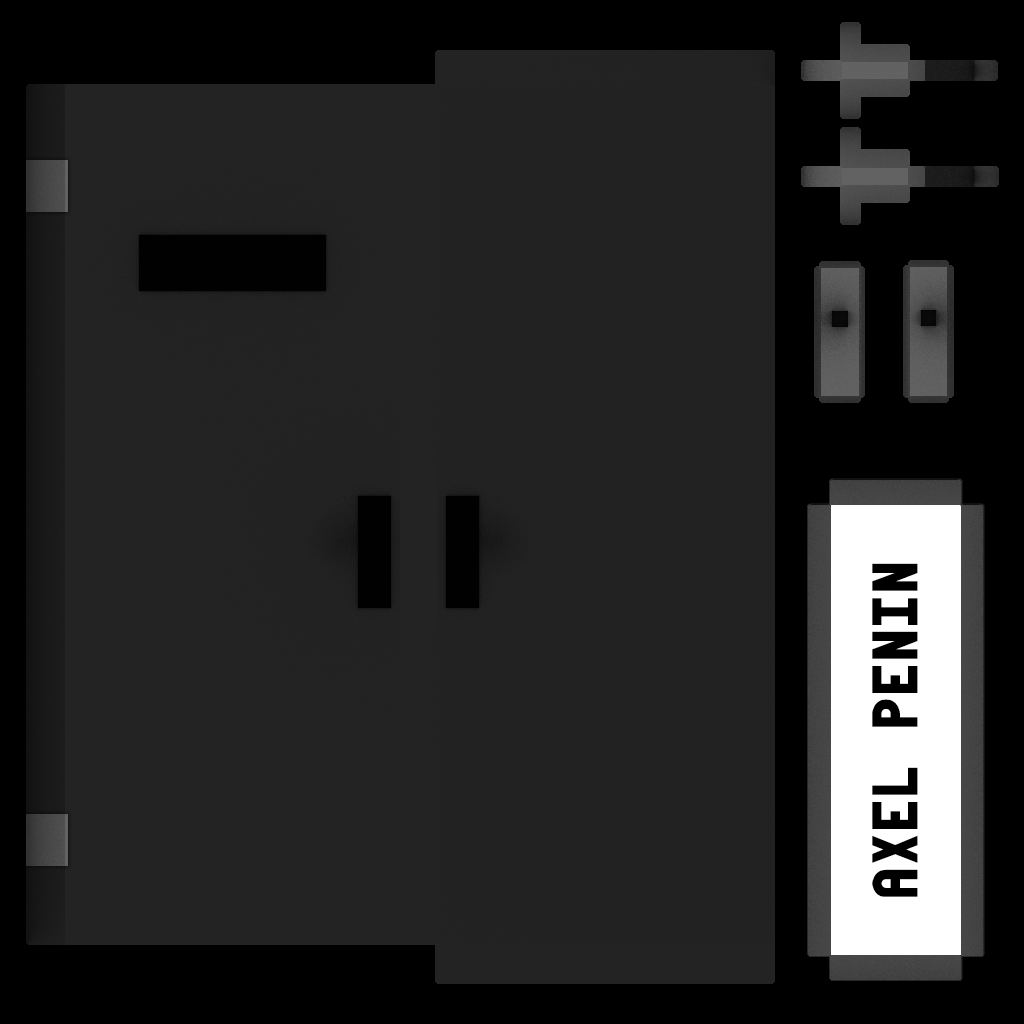
<style>
.page{position:relative;width:1024px;height:1024px;background:#232323}
.page>*{position:absolute;margin:0}
.t1{font:68px "absender";color:#000000}
</style>
<div class="page">
<p class="t1" style="left:872px;top:563px;width:46px;height:334px;rotate:-90deg">Axel Penin</p>
</div>
